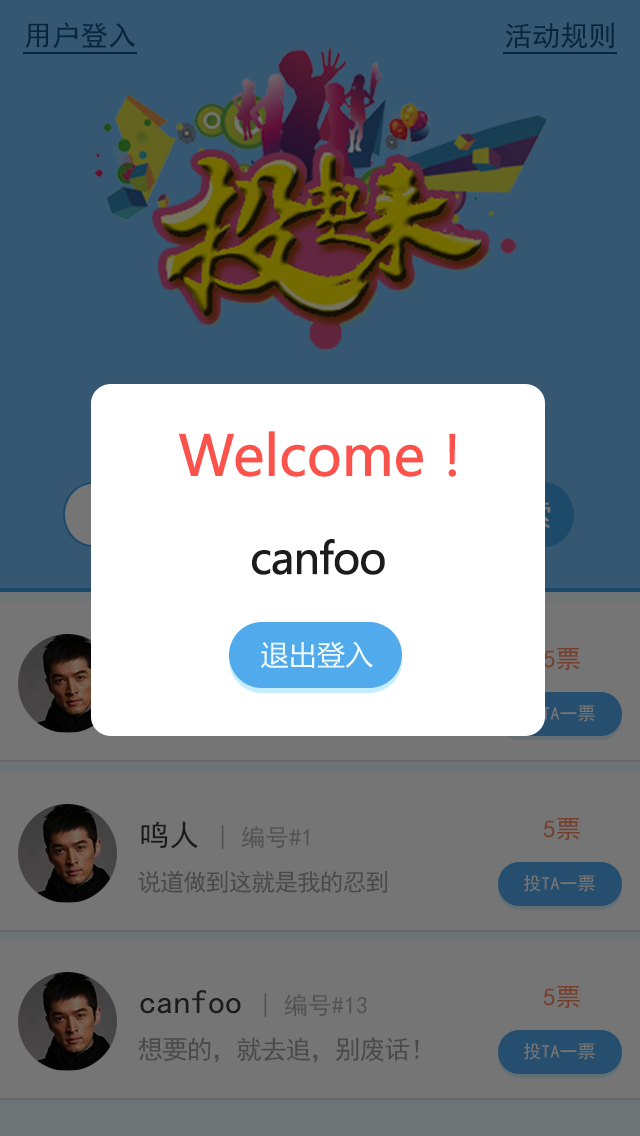
<style>
.page{position:relative;width:640px;height:1136px;background:#355771}
.page>*{position:absolute;margin:0}
.t1{font:28px "SimHei";letter-spacing:0.005em;color:#07263e}
.t2{font:55px "MicrosoftYaHei";letter-spacing:-0.025em;color:#fb524c;font-weight:bold}
.t3{font:43px "MicrosoftYaHei";letter-spacing:-0.05em;color:#1c1c1c;font-weight:bold}
.t4{font:28px "MicrosoftYaHei";letter-spacing:0.005em;color:#effbff}
.t5{font:25px "SimHei";letter-spacing:0.005em;color:#753f2d}
.t6{font:24px "SimHei";letter-spacing:0.005em}
.t7{font:30px "SimHei";letter-spacing:0.005em}
.t8{font:24px "SimHei";letter-spacing:-0.05em;color:#4a4a4a}
.t9{font:18px "SimHei";letter-spacing:0.005em;color:#757575}
.t10{font:34px "SimHei";letter-spacing:0.005em}
.t11{font:26px "SimHei";letter-spacing:-0.05em;color:#4a4a4a}
</style>
<div class="page">
<p class="t1" style="left:25px;top:22px;width:111px;height:27px">用户登入</p>
<p class="t1" style="left:505px;top:22px;width:109px;height:27px">活动规则</p>
<p class="t2" style="left:179px;top:431px;width:277px;height:46px">Welcome！</p>
<p class="t3" style="left:252px;top:539px;width:133px;height:36px">canfoo</p>
<p class="t4" style="left:261px;top:641px;width:112px;height:27px">退出登入</p>
<p class="t5" style="left:543px;top:647px;width:37px;height:24px">5票</p>
<p class="t6" style="left:141px;top:821px;width:168px;height:28px"><span class="t7">鸣人 </span>| 编号#1</p>
<p class="t5" style="left:543px;top:817px;width:37px;height:24px">5票</p>
<p class="t8" style="left:138px;top:870px;width:250px;height:23px">说道做到这就是我的忍到</p>
<p class="t9" style="left:523px;top:875px;width:72px;height:17px">投TA一票</p>
<p class="t6" style="left:140px;top:990px;width:227px;height:27px"><span class="t10">canfoo </span>| 编号#13</p>
<p class="t5" style="left:543px;top:985px;width:37px;height:24px">5票</p>
<p class="t11" style="left:138px;top:1037px;width:281px;height:26px">想要的，就去追，别废话！</p>
<p class="t9" style="left:523px;top:1043px;width:72px;height:17px">投TA一票</p>
</div>
